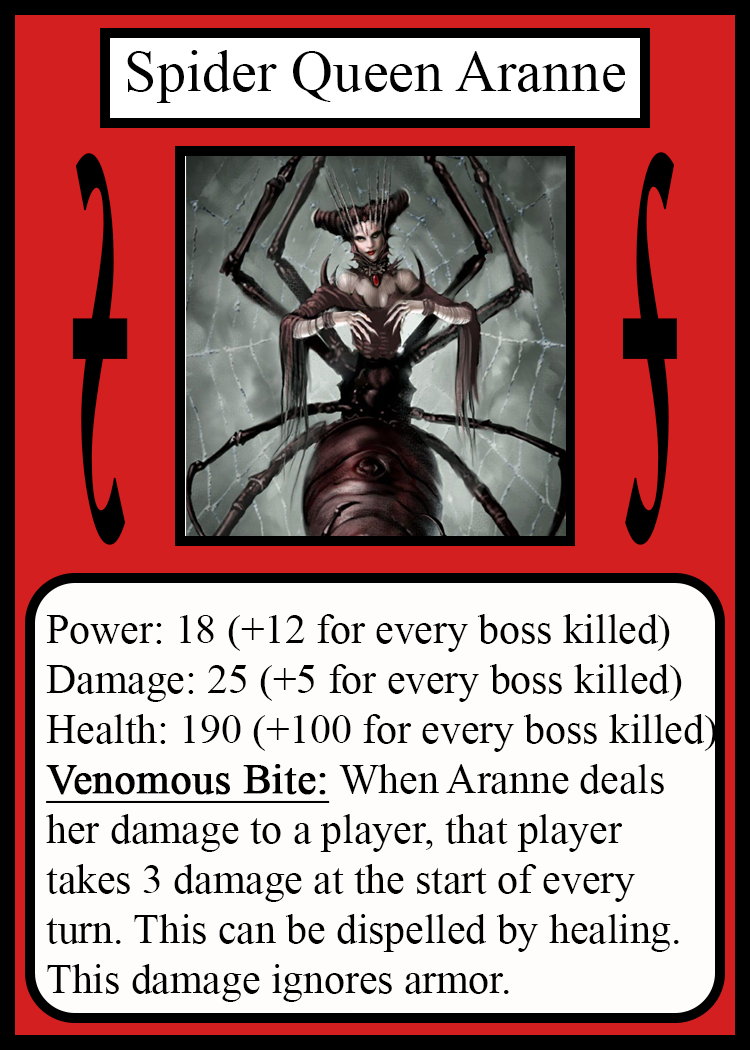
<style>
.page{position:relative;width:750px;height:1050px;background:#fffcfc}
.page>*{position:absolute;margin:0}
.t1{font:58.3px "TimesNewRomanPSMT";color:#010101}
.t2{font:814.3px "Apple-Chancery";color:#000000;font-weight:bold;scale:0.17 1}
.t3{font:814.6px "Apple-Chancery";color:#000000;font-weight:bold;scale:0.17 1}
.t4{font:41.7px "TimesNewRomanPSMT";color:#000000}
.t5{font:41.7px "TimesNewRomanPSMT";color:#000000;font-weight:bold;text-decoration:underline}
</style>
<div class="page">
<p class="t1" style="left:127px;top:50px;width:499px;height:53px">Spider Queen Aranne</p>
<p class="t2" style="left:72px;top:153px;width:56px;height:392px;rotate:180deg">s</p>
<p class="t3" style="left:622px;top:152px;width:55px;height:393px">s</p>
<p class="t4" style="left:46px;top:614px;width:671px;height:388px">Power: 18 (+12 for every boss killed)<br>Damage: 25 (+5 for every boss killed)<br>Health: 190 (+100 for every boss killed)<br><span class="t5">Venomous Bite:</span> When Aranne deals<br>her damage to a player, that player<br>takes 3 damage at the start of every <br>turn. This can be dispelled by healing.<br>This damage ignores armor.</p>
</div>
